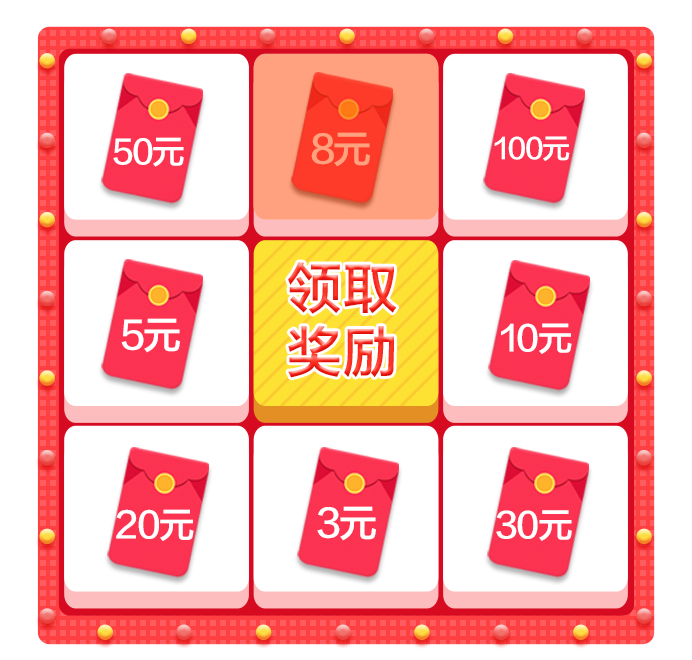
<style>
.page{position:relative;width:692px;height:660px;background:#ffffff}
.page>*{position:absolute;margin:0}
.t1{font:32.7px "FZLTZHK--GBK1-0";letter-spacing:-0.05em;color:#ffffff}
.t2{font:38px "FZLTZHK--GBK1-0";letter-spacing:-0.05em;color:#ffa07f}
.t3{font:28px "FZLTZHK--GBK1-0";letter-spacing:-0.05em;color:#ffffff}
.t4{font:54.6px/64.6px "FZLTZHK--GBK1-0";letter-spacing:0.025em}
.t5{font:38px "FZLTZHK--GBK1-0";letter-spacing:-0.05em;color:#ffffff}
.t6{font:34.6px "FZLTZHK--GBK1-0";letter-spacing:-0.05em;color:#ffffff}
.t7{font:35.4px "FZLTZHK--GBK1-0";letter-spacing:-0.05em;color:#ffffff}
.t8{font:34.7px "FZLTZHK--GBK1-0";letter-spacing:-0.05em;color:#ffffff}
</style>
<div class="page">
<p class="t1" style="left:113px;top:137px;width:71px;height:30px">50元</p>
<p class="t2" style="left:311px;top:131px;width:59px;height:35px">5元</p>
<p class="t2" style="left:311px;top:132px;width:59px;height:35px">8元</p>
<p class="t3" style="left:494px;top:136px;width:76px;height:25px">100元</p>
<p class="t4" style="left:288px;top:262px;width:109px;height:116px;text-align:center">领取<br>奖励</p>
<p class="t4" style="left:288px;top:262px;width:109px;height:116px;text-align:center">领取<br>奖励</p>
<p class="t5" style="left:121px;top:318px;width:59px;height:35px">5元</p>
<p class="t6" style="left:501px;top:323px;width:71px;height:31px">10元</p>
<p class="t7" style="left:116px;top:509px;width:78px;height:32px">20元</p>
<p class="t5" style="left:317px;top:506px;width:59px;height:35px">3元</p>
<p class="t8" style="left:496px;top:510px;width:76px;height:31px">30元</p>
</div>
